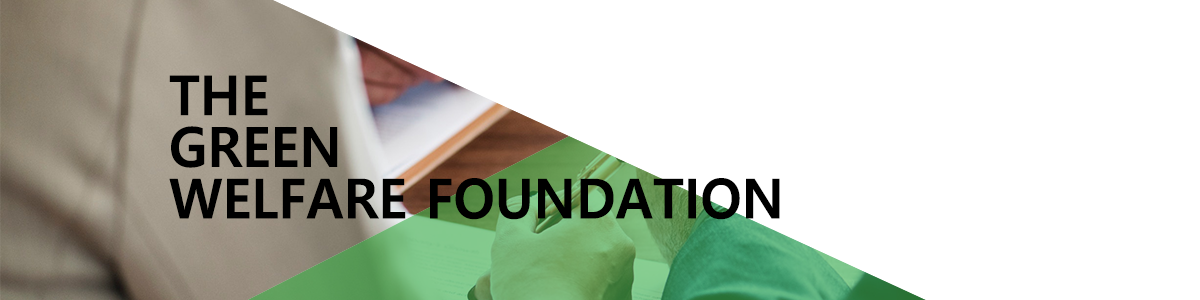
<style>
.page{position:relative;width:1200px;height:300px;background:#ffffff}
.page>*{position:absolute;margin:0}
.t1{font:55.2px/51.6px "MalgunGothicBold";color:#000000;scale:0.96 1}
</style>
<div class="page">
<p class="t1" style="left:169px;top:75px;width:611px;height:145px">THE<br>GREEN<br>WELFARE FOUNDATION</p>
</div>
